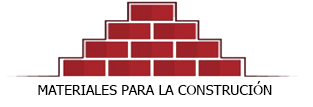
<style>
.page{position:relative;width:313px;height:107px;background:#ffffff}
.page>*{position:absolute;margin:0}
.t1{font:14px "Tahoma";color:#000000}
</style>
<div class="page">
<p class="t1" style="left:38px;top:81px;width:234px;height:14px">MATERIALES PARA LA CONSTRUCIÓN</p>
</div>
